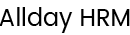
<style>
.page{position:relative;width:130px;height:35px;background:#ffffff}
.page>*{position:absolute;margin:0}
.t1{font:24px "Poppins-Regular";color:#000000}
</style>
<div class="page">
<p class="t1" style="left:0px;top:7px;width:130px;height:26px">Allday HRM</p>
</div>
